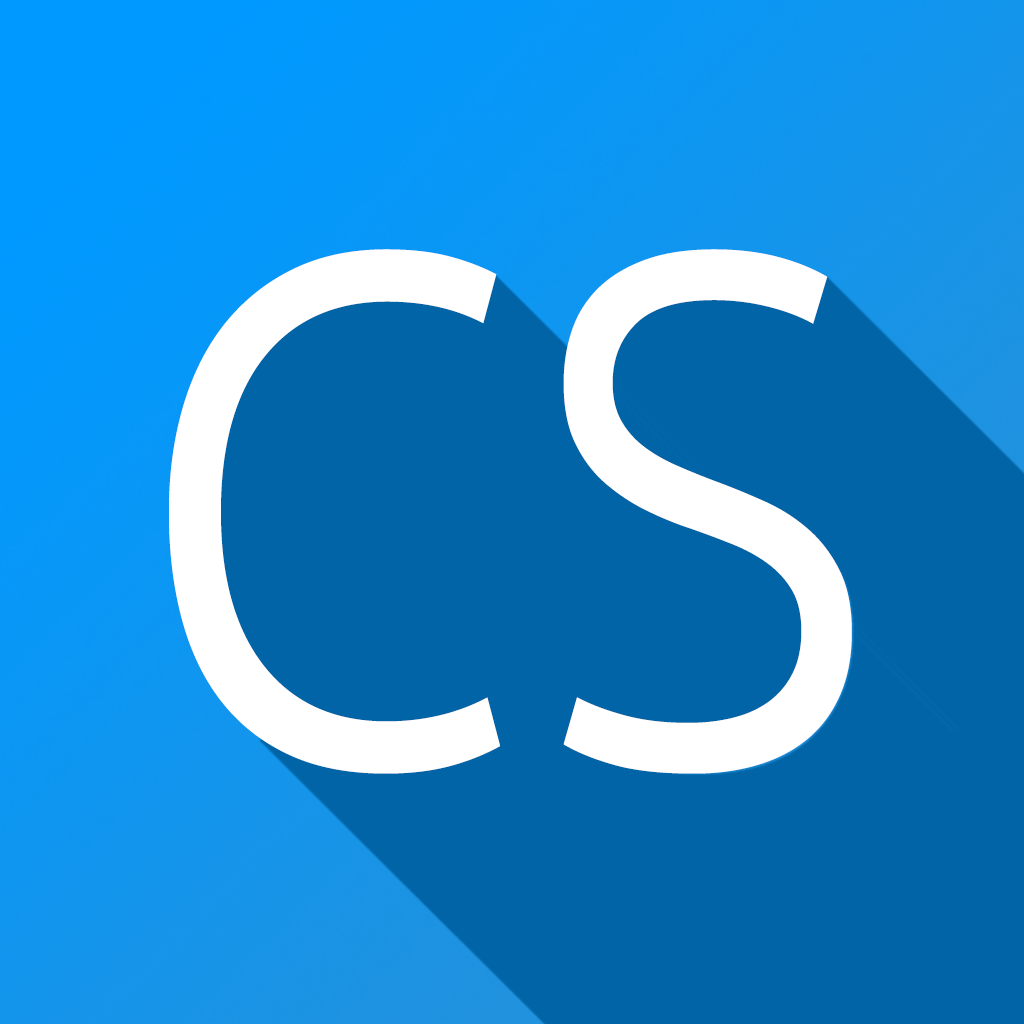
<style>
.page{position:relative;width:1024px;height:1024px;background:#0064a6}
.page>*{position:absolute;margin:0}
.t1{font:670.3px "SukhumvitSet-Text";color:#ffffff;scale:0.9 1}
</style>
<div class="page">
<p class="t1" style="left:169px;top:249px;width:683px;height:525px">CS</p>
</div>
